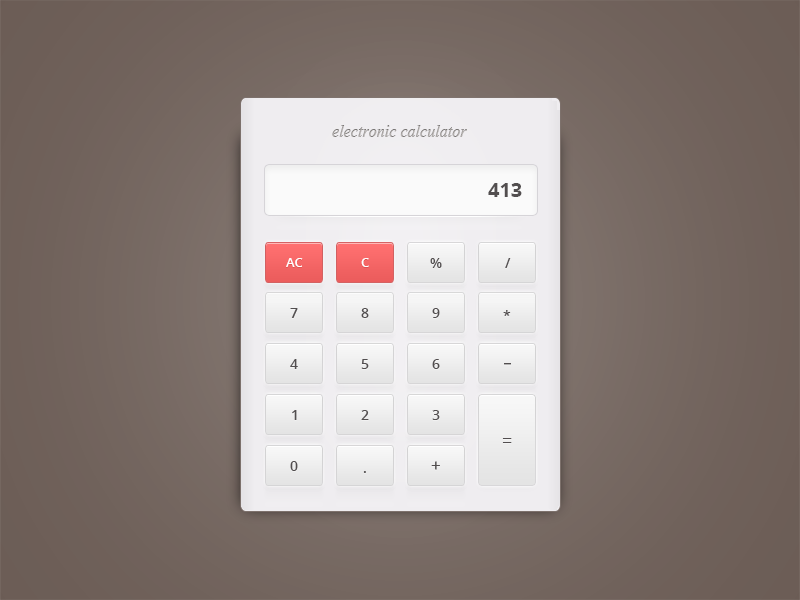
<style>
.page{position:relative;width:800px;height:600px}
.page>*{position:absolute;margin:0}
.t1{font:20px "Vijaya";color:#b1aeac}
.t2{font:20px "OpenSans-Bold";color:#524e4f}
.t3{font:13px "OpenSans-Semibold";color:#ffffff;text-transform:uppercase}
.t4{font:14px "OpenSans-Semibold";color:#524e4f;text-transform:uppercase}
.t5{font:14px "OpenSans-Extrabold";color:#524e4f;text-transform:uppercase}
.t6{font:18px "OpenSans";color:#524e4f;text-transform:uppercase}
.t7{font:17px "OpenSans-Semibold";color:#524e4f;text-transform:uppercase}
</style>
<div class="page">
<p class="t1" style="left:332px;top:125px;width:135px;height:12px">electronic calculator</p>
<p class="t2" style="left:488px;top:183px;width:34px;height:14px">413</p>
<p class="t3" style="left:286px;top:258px;width:17px;height:9px">AC</p>
<p class="t3" style="left:361px;top:258px;width:8px;height:9px">C</p>
<p class="t4" style="left:430px;top:258px;width:12px;height:10px">%</p>
<p class="t4" style="left:505px;top:258px;width:6px;height:10px">/</p>
<p class="t4" style="left:290px;top:308px;width:8px;height:10px">7</p>
<p class="t4" style="left:361px;top:308px;width:8px;height:10px">8</p>
<p class="t4" style="left:432px;top:308px;width:8px;height:10px">9</p>
<p class="t4" style="left:503px;top:310px;width:8px;height:6px">*</p>
<p class="t4" style="left:290px;top:359px;width:8px;height:10px">4</p>
<p class="t4" style="left:361px;top:359px;width:8px;height:10px">5</p>
<p class="t4" style="left:432px;top:359px;width:8px;height:10px">6</p>
<p class="t5" style="left:504px;top:363px;width:7px;height:2px">_</p>
<p class="t4" style="left:292px;top:410px;width:5px;height:10px">1</p>
<p class="t4" style="left:361px;top:410px;width:8px;height:10px">2</p>
<p class="t4" style="left:432px;top:410px;width:8px;height:10px">3</p>
<p class="t6" style="left:502px;top:438px;width:10px;height:5px">=</p>
<p class="t4" style="left:290px;top:461px;width:8px;height:10px">0</p>
<p class="t7" style="left:431px;top:461px;width:9px;height:9px">+</p>
<p class="t4" style="left:363px;top:471px;width:3px;height:2px">.</p>
</div>
